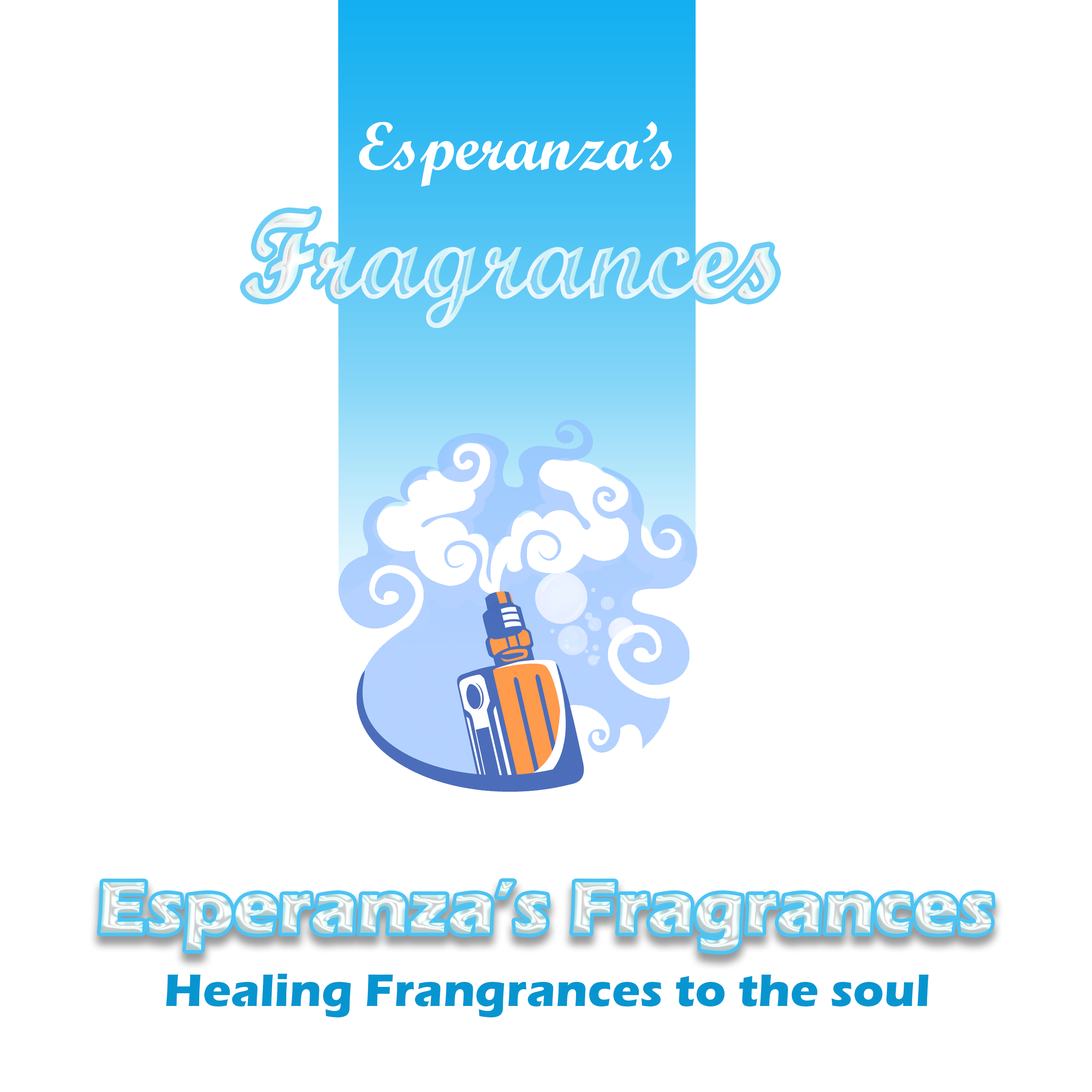
<style>
.page{position:relative;width:1092px;height:1092px;background:#ffffff}
.page>*{position:absolute;margin:0}
.t1{font:68.2px "ScriptMTBold";color:#ffffff}
.t2{font:121.3px "ScriptMTBold"}
.t3{font:47.5px "ErasITC-Bold";color:#0795d0}
</style>
<div class="page">
<p class="t1" style="left:359px;top:121px;width:313px;height:66px">Esperanza’s</p>
<p class="t2" style="left:245px;top:212px;width:530px;height:116px">Fragrances</p>
<p class="t2" style="left:245px;top:212px;width:530px;height:116px">Fragrances</p>
<p class="t3" style="left:166px;top:974px;width:763px;height:43px">Healing Frangrances to the soul</p>
</div>
